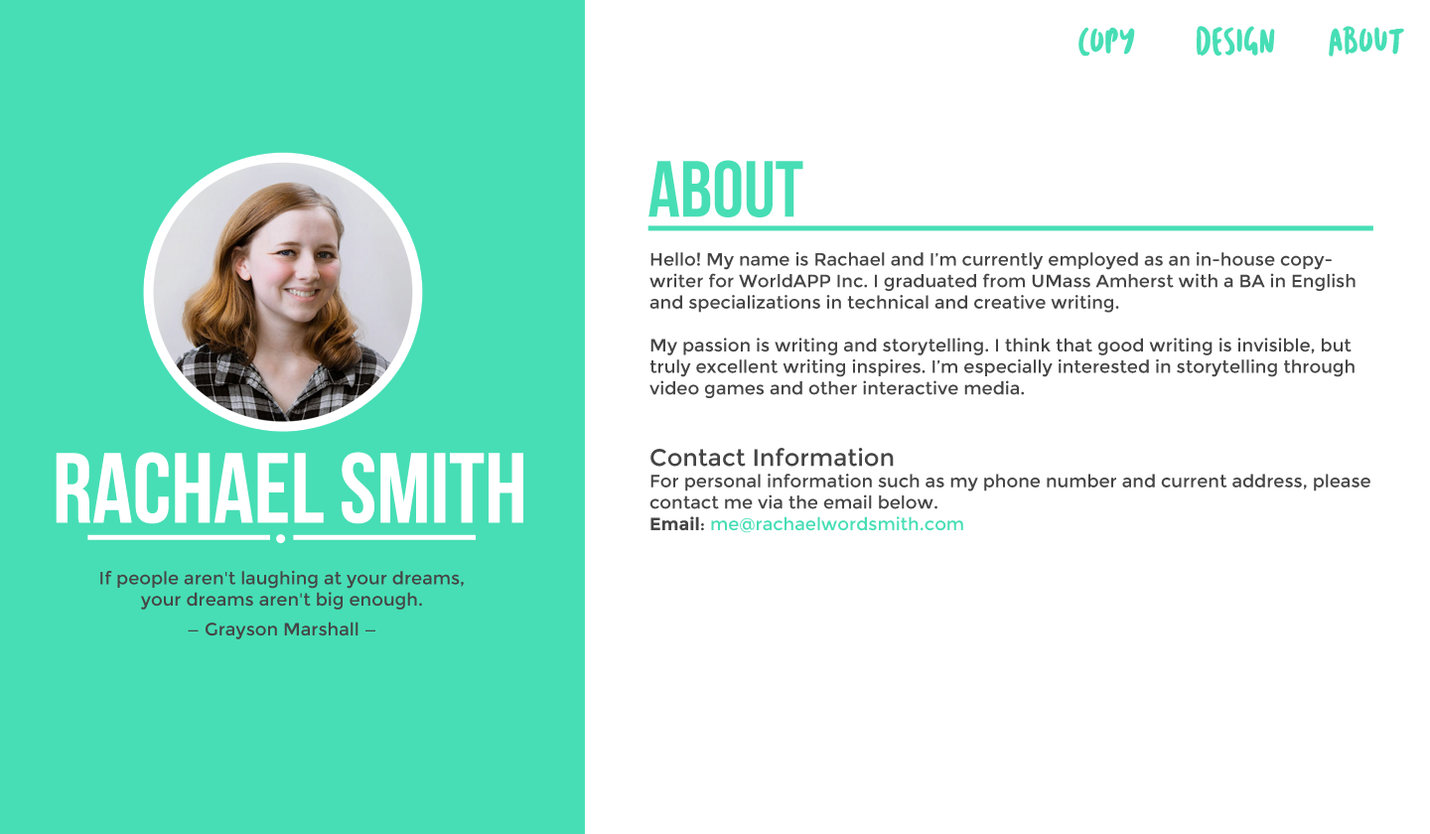
<style>
.page{position:relative;width:1430px;height:834px;background:#ffffff}
.page>*{position:absolute;margin:0}
.t1{font:17.9px "CartoonMarker";color:#47deb5}
.t2{font:79.4px "BebasNeue";color:#47deb5}
.t3{font:17.9px "Montserrat-Regular";color:#454545}
.t4{font:23.8px "Montserrat-Regular";color:#454545}
.t5{font:17.9px "Montserrat-Bold";color:#454545}
.t6{font:17.9px "Montserrat-Regular";color:#47deb5}
.t7{font:99.3px "BebasNeue";color:#ffffff}
.t8{font:17.9px/29.8px "Montserrat-Regular";color:#454545}
</style>
<div class="page">
<p class="t1" style="left:1078px;top:26px;width:326px;height:31px">copy   design  about</p>
<p class="t2" style="left:648px;top:160px;width:155px;height:57px">ABOUT</p>
<p class="t3" style="left:649px;top:251px;width:721px;height:282px">Hello! My name is Rachael and I’m currently employed as an in-house copywriter for WorldAPP Inc. I graduated from UMass Amherst with a BA in English and specializations in technical and creative writing.<br><br>My passion is writing and storytelling. I think that good writing is invisible, but truly excellent writing inspires. I’m especially interested in storytelling through video games and other interactive media. <br><br><br><span class="t4">Contact Information<br></span>For personal information such as my phone number and current address, please contact me via the email below.<br><span class="t5">Email</span>: <span class="t6">me@rachaelwordsmith.com</span></p>
<p class="t7" style="left:56px;top:452px;width:467px;height:72px">rachael SMith</p>
<p class="t3" style="left:100px;top:570px;width:364px;height:69px;text-align:center">If people aren't laughing at your dreams, your dreams aren't big enough.<br><span class="t8">— Grayson Marshall —</span></p>
</div>
